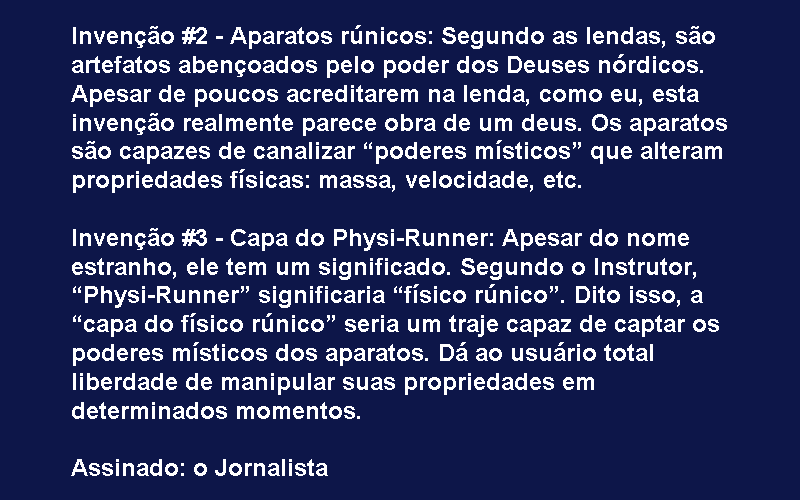
<style>
.page{position:relative;width:800px;height:500px;background:#0d1649}
.page>*{position:absolute;margin:0}
.t1{font:24px "Arial-BoldMT";color:#ffffff}
</style>
<div class="page">
<p class="t1" style="left:71px;top:25px;width:656px;height:451px">Invenção #2 - Aparatos rúnicos: Segundo as lendas, são artefatos abençoados pelo poder dos Deuses nórdicos. Apesar de poucos acreditarem na lenda, como eu, esta invenção realmente parece obra de um deus. Os aparatos são capazes de canalizar “poderes místicos” que alteram propriedades físicas: massa, velocidade, etc.<br><br>Invenção #3 - Capa do Physi-Runner: Apesar do nome estranho, ele tem um significado. Segundo o Instrutor, “Physi-Runner” significaria “físico rúnico”. Dito isso, a “capa do físico rúnico” seria um traje capaz de captar os poderes místicos dos aparatos. Dá ao usuário total liberdade de manipular suas propriedades em determinados momentos.<br><br>Assinado: o Jornalista</p>
</div>
